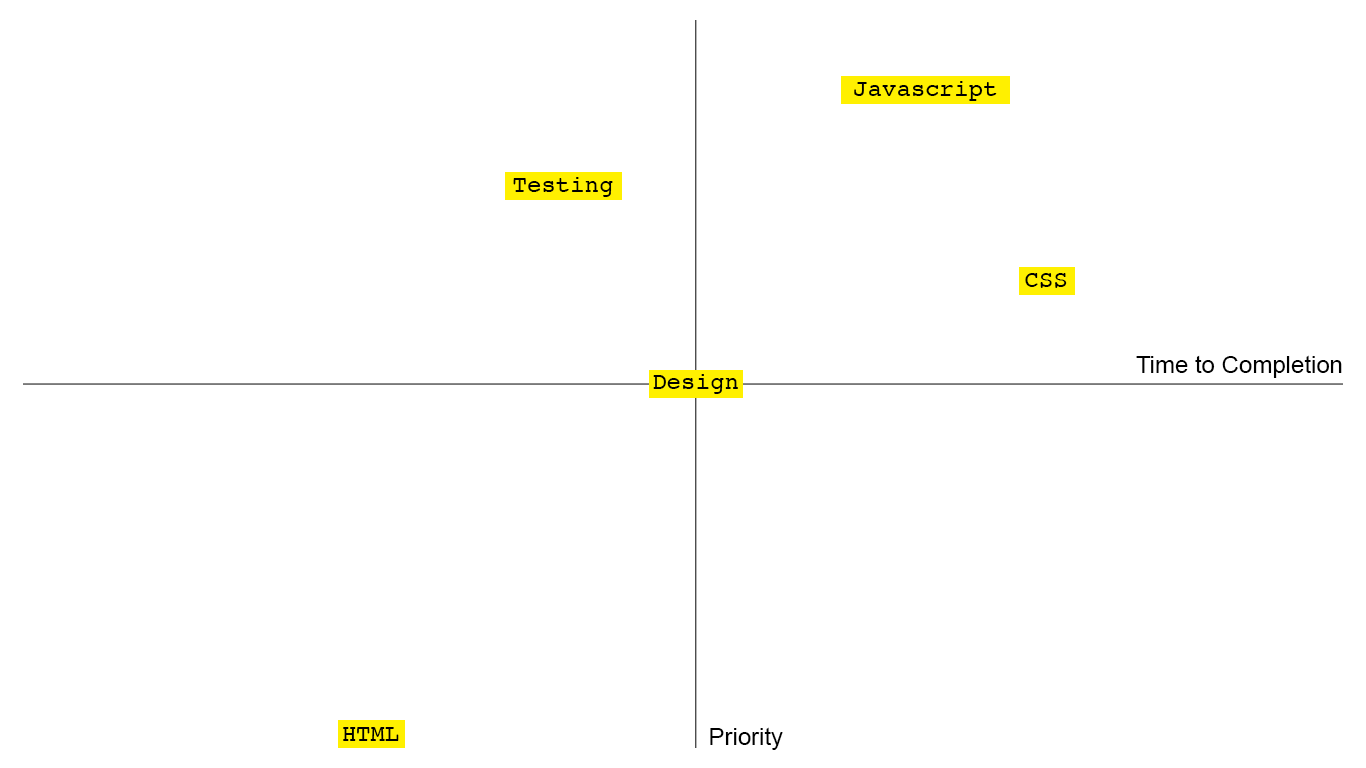
<style>
.page{position:relative;width:1366px;height:768px;background:#ffffff}
.page>*{position:absolute;margin:0}
.t1{font:24px "Courier";color:#000000}
.t2{font:24px "ArialMT";color:#000000}
</style>
<div class="page">
<p class="t1" style="left:854px;top:81px;width:143px;height:20px">Javascript</p>
<p class="t1" style="left:513px;top:177px;width:100px;height:20px">Testing</p>
<p class="t1" style="left:1025px;top:273px;width:42px;height:15px">CSS</p>
<p class="t2" style="left:1136px;top:355px;width:206px;height:23px">Time to Completion</p>
<p class="t1" style="left:653px;top:374px;width:85px;height:20px">Design</p>
<p class="t1" style="left:343px;top:727px;width:56px;height:14px">HTML</p>
<p class="t2" style="left:710px;top:727px;width:73px;height:23px">Priority</p>
</div>
